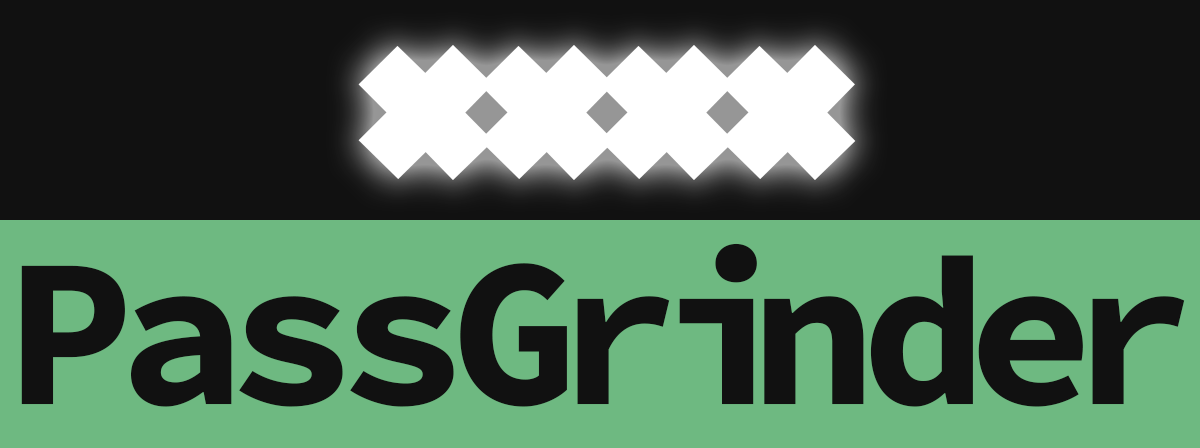
<style>
.page{position:relative;width:1200px;height:448px;background:#111111}
.page>*{position:absolute;margin:0}
.t1{font:380px "Braggadocio";letter-spacing:-0.1em;color:#ffffff}
.t2{font:212px "SourceCodePro-Bold";letter-spacing:-0.08em;color:#111111}
.t3{font:212px "SourceCodePro-Bold";letter-spacing:-0.07em;color:#111111}
.t4{font:212px "SourceCodePro-Bold";letter-spacing:-0.12em;color:#111111}
.t5{font:212px "SourceCodePro-Bold";letter-spacing:-0.194em;color:#111111}
.t6{font:212px "SourceCodePro-Bold";letter-spacing:-0.1em;color:#111111}
.t7{font:212px "SourceCodePro-Bold";letter-spacing:-0.124em;color:#111111}
</style>
<div class="page">
<p class="t1" style="left:358px;top:45px;width:498px;height:135px">****</p>
<p class="t2" style="left:21px;top:243px;width:1164px;height:164px"><span class="t3">P</span>as<span class="t3">s</span><span class="t4">G</span>r<span class="t5">i</span><span class="t3">n</span><span class="t6">d</span><span class="t7">e</span>r</p>
</div>
